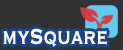
<style>
.page{position:relative;width:123px;height:50px;background:#333333}
.page>*{position:absolute;margin:0}
.t1{font:28.3px "Copperplate";color:#ffffff;scale:0.76 1}
</style>
<div class="page">
<p class="t1" style="left:3px;top:28px;width:104px;height:19px">mySquare</p>
</div>
